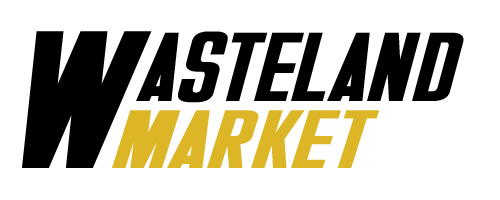
<style>
.page{position:relative;width:500px;height:200px;background:#ffffff}
.page>*{position:absolute;margin:0}
.t1{font:200px "Overseer-Italic";color:#000000}
.t2{font:100px "Overseer-Italic";color:#000000}
.t3{font:84.6px "Overseer-Italic";color:#dcb626;scale:1.18 1}
</style>
<div class="page">
<p class="t1" style="left:21px;top:31px;width:131px;height:137px">W</p>
<p class="t2" style="left:136px;top:31px;width:328px;height:72px">ASTELAND</p>
<p class="t3" style="left:112px;top:110px;width:268px;height:58px">MARKET</p>
</div>
